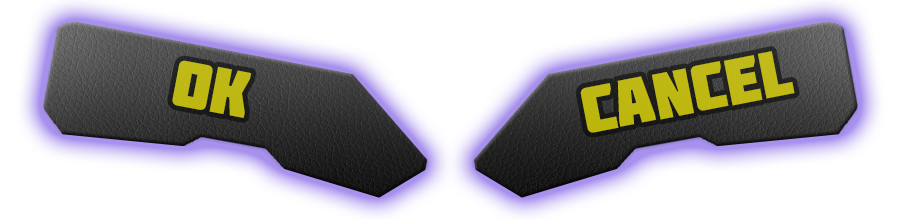
<style>
.page{position:relative;width:901px;height:220px;background:#ffffff}
.page>*{position:absolute;margin:0}
.t1{font:65px "Molot";color:#beb813}
.t2{font:65px "Molot";color:#bfb814}
</style>
<div class="page">
<p class="t1" style="left:580px;top:51px;width:215px;height:82px;rotate:-11deg">CANCEL</p>
<p class="t2" style="left:172px;top:60px;width:80px;height:58px;rotate:11deg">OK</p>
</div>
